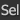
<style>
.page{position:relative;width:20px;height:20px;background:#333333}
.page>*{position:absolute;margin:0}
.t1{font:14px "Tahoma";color:#cccccc}
</style>
<div class="page">
<p class="t1" style="left:1px;top:4px;width:18px;height:12px">Sel</p>
</div>
